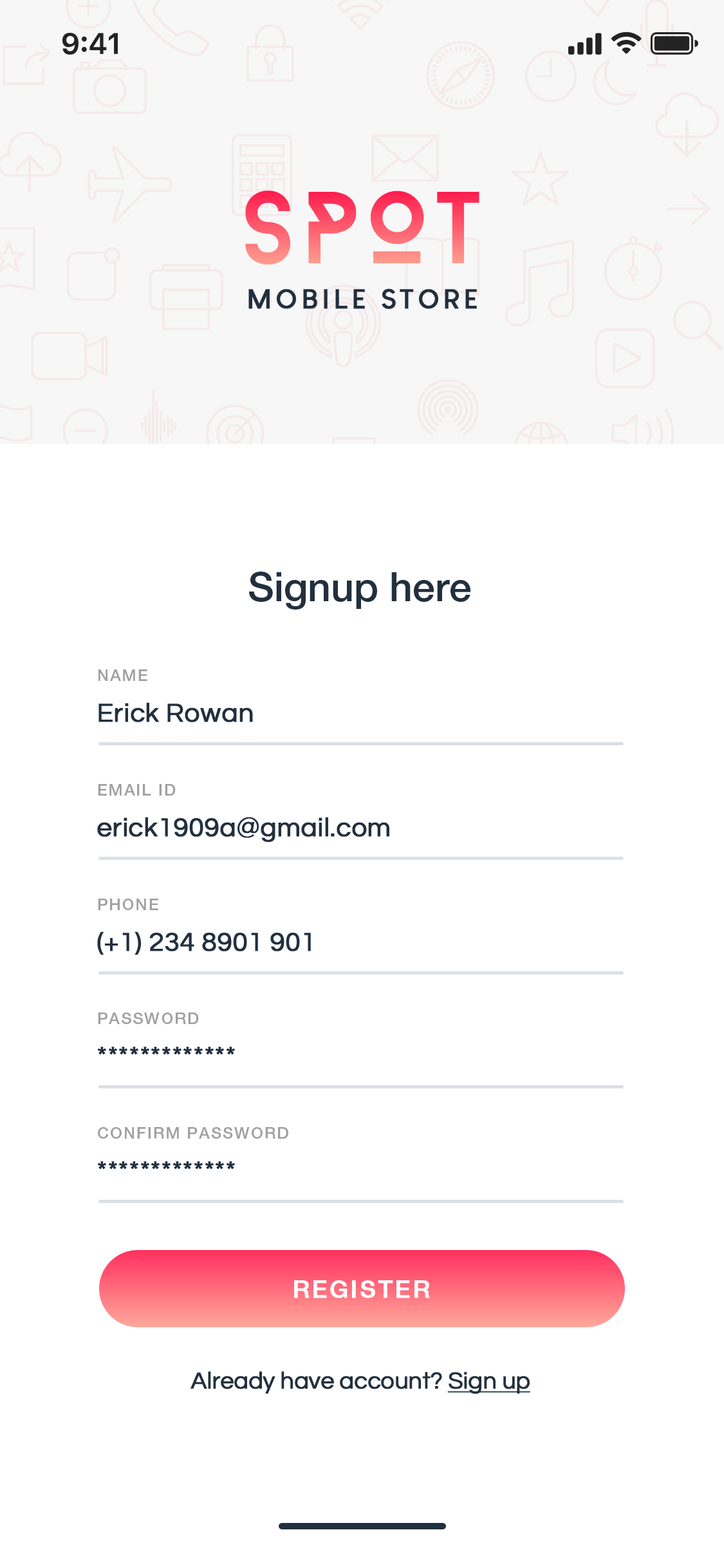
<style>
.page{position:relative;width:724px;height:1568px;background:#ffffff}
.page>*{position:absolute;margin:0}
.t1{font:101.9px "BaronNeue";letter-spacing:0.05em}
.t2{font:26.8px "LouisGeorgeCafe-Bold";letter-spacing:0.14em;color:#222f3e;text-transform:uppercase;font-weight:bold}
.t3{font:40.2px "HelveticaNeue-Medium";color:#222f3e}
.t4{font:16.1px "HelveticaNeue-Medium";letter-spacing:0.08em;color:#a0a0a0;text-transform:uppercase}
.t5{font:26.8px "Questrial-Regular";color:#222f3e;font-weight:bold}
.t6{font:24.1px "HelveticaNeue-Medium";letter-spacing:0.08em;color:#ffffff;font-weight:bold}
.t7{font:24.1px "Questrial-Regular";letter-spacing:-0.02em;color:#222f3e;font-weight:bold}
.t8{font:24.1px "Questrial-Regular";letter-spacing:-0.02em;color:#222f3e;font-weight:bold;text-decoration:underline}
</style>
<div class="page">
<p class="t1" style="left:245px;top:191px;width:235px;height:74px">SPOT</p>
<p class="t2" style="left:248px;top:288px;width:229px;height:21px">Mobile STORE</p>
<p class="t3" style="left:249px;top:572px;width:222px;height:38px">Signup here</p>
<p class="t4" style="left:98px;top:669px;width:49px;height:12px">Name</p>
<p class="t5" style="left:98px;top:702px;width:155px;height:20px">Erick Rowan</p>
<p class="t4" style="left:98px;top:784px;width:78px;height:12px">Email id</p>
<p class="t5" style="left:97px;top:817px;width:292px;height:25px">erick1909a@gmail.com</p>
<p class="t4" style="left:98px;top:899px;width:60px;height:11px">PHONE</p>
<p class="t5" style="left:97px;top:931px;width:214px;height:24px">(+1) 234 8901 901</p>
<p class="t4" style="left:98px;top:1013px;width:101px;height:11px">PASSWORD</p>
<p class="t5" style="left:98px;top:1047px;width:137px;height:7px">*************</p>
<p class="t4" style="left:98px;top:1127px;width:190px;height:12px">CONFIRM PASSWORD</p>
<p class="t5" style="left:98px;top:1161px;width:137px;height:8px">*************</p>
<p class="t6" style="left:294px;top:1280px;width:136px;height:18px">REGISTER</p>
<p class="t7" style="left:191px;top:1371px;width:339px;height:23px">Already have account? <span class="t8">Sign up</span></p>
</div>
